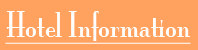
<style>
.page{position:relative;width:198px;height:50px;background:#ffa15f}
.page>*{position:absolute;margin:0}
.t1{font:32px "MonaLisaSolidITCTT";color:#fefefe;text-decoration:underline}
</style>
<div class="page">
<p class="t1" style="left:5px;top:11px;width:186px;height:33px">Hotel Information</p>
</div>
